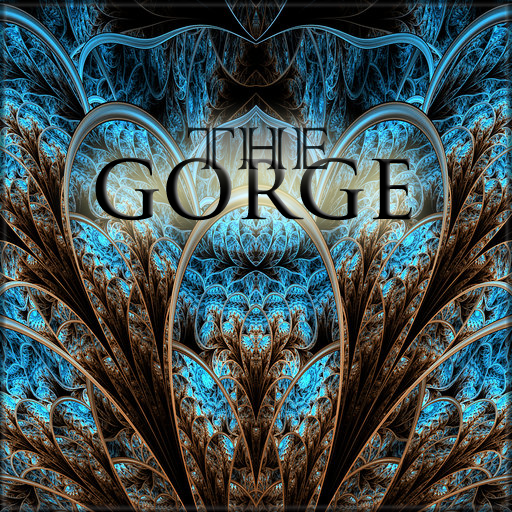
<style>
.page{position:relative;width:512px;height:512px}
.page>*{position:absolute;margin:0}
.t1{font:80px "ColonnaMT";letter-spacing:-0.003em;color:#161e1e}
.t2{font:80px "TrajanPro-Bold";letter-spacing:-0.003em}
</style>
<div class="page">
<p class="t1" style="left:187px;top:127px;width:143px;height:43px">THE</p>
<p class="t2" style="left:95px;top:157px;width:317px;height:64px">GORGE</p>
</div>
